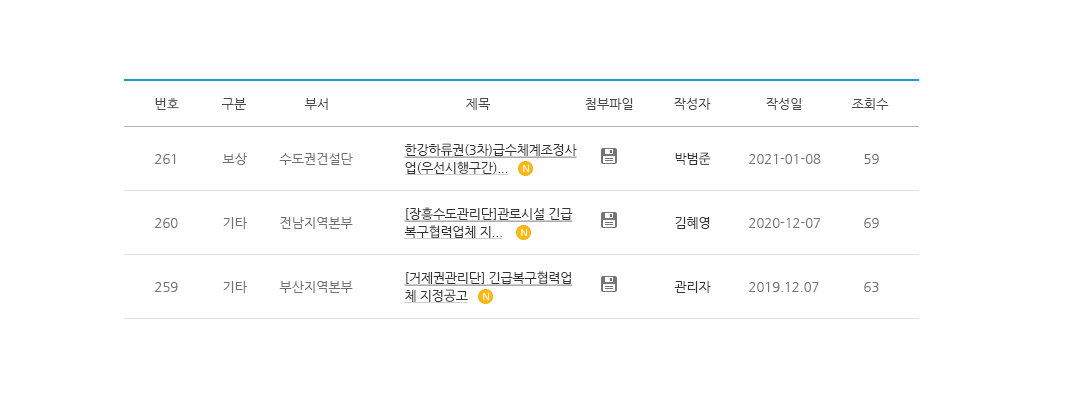
<style>
.page{position:relative;width:1065px;height:407px;background:#ffffff}
.page>*{position:absolute;margin:0}
.t1{font:13px "NanumGothic";color:#494949}
.t2{font:13px/18px "NanumGothic";letter-spacing:-0.02em;color:#323232;text-decoration:underline}
.t3{font:13px "NanumGothic";color:#717171}
.t4{font:13px "NanumGothic";letter-spacing:-0.02em;color:#323232}
</style>
<div class="page">
<p class="t1" style="left:155px;top:98px;width:24px;height:12px">번호</p>
<p class="t1" style="left:222px;top:98px;width:24px;height:12px">구분</p>
<p class="t1" style="left:305px;top:98px;width:23px;height:12px">부서</p>
<p class="t1" style="left:466px;top:98px;width:24px;height:12px">제목</p>
<p class="t1" style="left:585px;top:98px;width:48px;height:12px">첨부파일</p>
<p class="t1" style="left:674px;top:98px;width:37px;height:12px">작성자</p>
<p class="t1" style="left:766px;top:98px;width:36px;height:12px">작성일</p>
<p class="t1" style="left:852px;top:98px;width:37px;height:12px">조회수</p>
<p class="t2" style="left:404px;top:143px;width:173px;height:32px">한강하류권(3차)급수체계조정사<br>업(우선시행구간)...</p>
<p class="t3" style="left:155px;top:154px;width:21px;height:10px">261</p>
<p class="t3" style="left:222px;top:153px;width:25px;height:12px">보상</p>
<p class="t3" style="left:279px;top:153px;width:74px;height:12px">수도권건설단</p>
<p class="t4" style="left:675px;top:152px;width:36px;height:13px">박범준</p>
<p class="t3" style="left:749px;top:154px;width:72px;height:10px">2021-01-08</p>
<p class="t3" style="left:864px;top:154px;width:15px;height:10px">59</p>
<p class="t2" style="left:404px;top:207px;width:169px;height:32px">[장흥수도관리단]관로시설 긴급<br>복구협력업체 지...</p>
<p class="t3" style="left:155px;top:218px;width:23px;height:10px">260</p>
<p class="t3" style="left:223px;top:217px;width:24px;height:12px">기타</p>
<p class="t3" style="left:280px;top:217px;width:73px;height:12px">전남지역본부</p>
<p class="t4" style="left:675px;top:217px;width:35px;height:12px">김혜영</p>
<p class="t3" style="left:749px;top:218px;width:71px;height:10px">2020-12-07</p>
<p class="t3" style="left:864px;top:218px;width:15px;height:10px">69</p>
<p class="t3" style="left:223px;top:281px;width:24px;height:12px">기타</p>
<p class="t3" style="left:279px;top:281px;width:74px;height:12px">부산지역본부</p>
<p class="t2" style="left:404px;top:271px;width:169px;height:32px">[거제권관리단] 긴급복구협력업<br>체 지정공고</p>
<p class="t4" style="left:674px;top:281px;width:37px;height:12px">관리자</p>
<p class="t3" style="left:155px;top:282px;width:23px;height:10px">259</p>
<p class="t3" style="left:749px;top:282px;width:70px;height:10px">2019.12.07</p>
<p class="t3" style="left:864px;top:282px;width:15px;height:10px">63</p>
</div>
